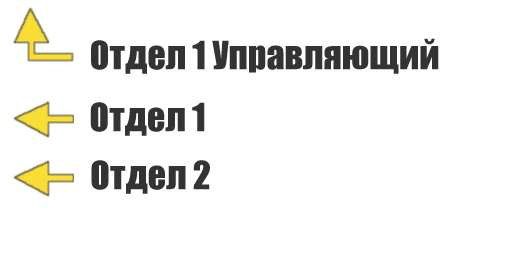
<style>
.page{position:relative;width:512px;height:256px;background:#ffffff}
.page>*{position:absolute;margin:0}
.t1{font:36px "Impact";color:#333333}
</style>
<div class="page">
<p class="t1" style="left:91px;top:38px;width:348px;height:36px">Отдел 1 Управляющий</p>
<p class="t1" style="left:90px;top:102px;width:115px;height:34px">Отдел 1</p>
<p class="t1" style="left:91px;top:160px;width:119px;height:34px">Отдел 2</p>
</div>
